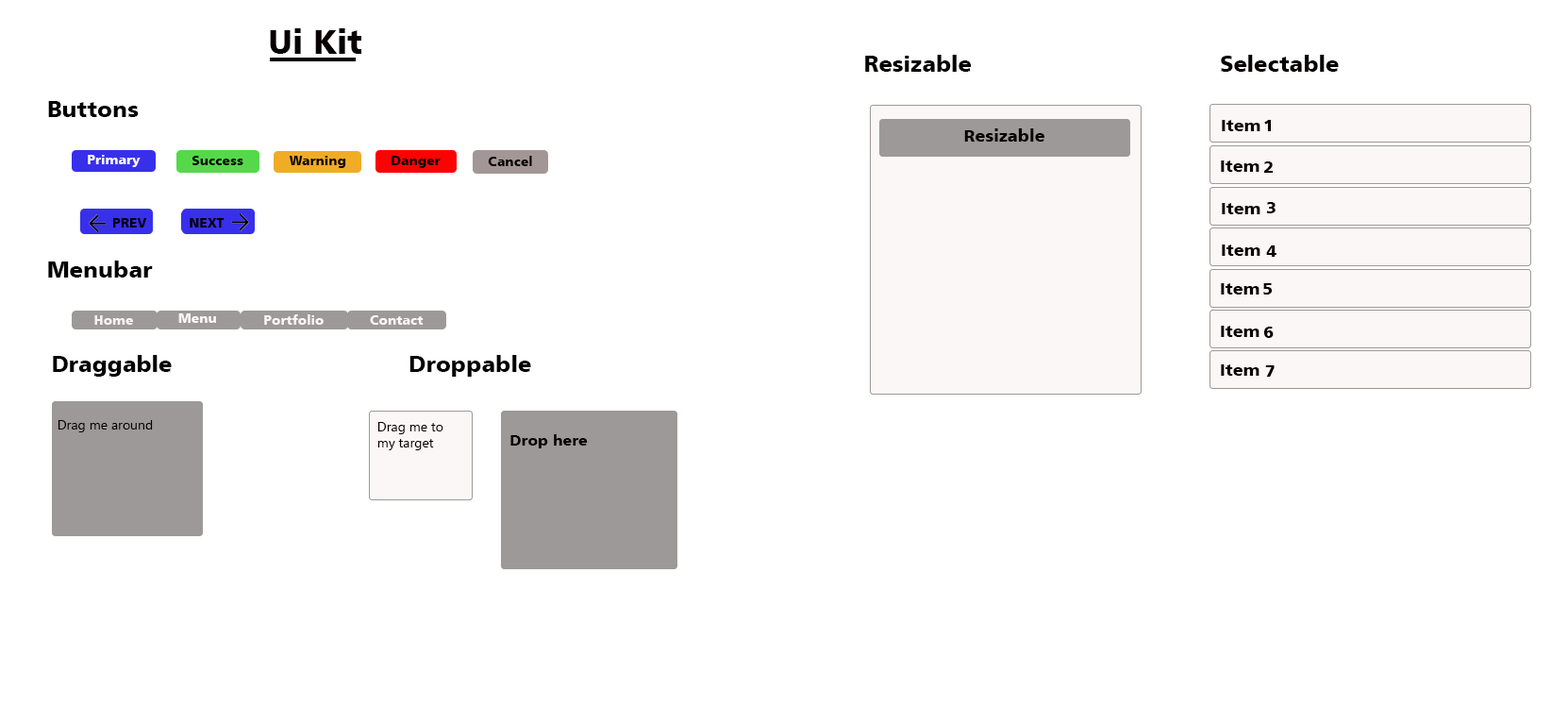
<style>
.page{position:relative;width:1568px;height:725px;background:#ffffff}
.page>*{position:absolute;margin:0}
.t1{font:34px "Humanist777BT-BlackB";color:#070000}
.t2{font:22.6px "Humanist777BT-BlackB";color:#070000}
.t3{font:22.6px "Humanist777BT-BlackB";color:#040000}
.t4{font:17px "Humanist777BT-BlackB";color:#070000}
.t5{font:13.2px "Humanist777BT-BlackB";color:#faf8f8}
.t6{font:13.2px "Humanist777BT-BlackB";color:#040000}
.t7{font:13.2px "Humanist777BT-BlackB";color:#070000}
.t8{font:22.6px "Humanist777BT-BlackB";color:#000000}
.t9{font:13.2px "Humanist777BT-BlackB";color:#f8f2f2}
.t10{font:13.2px "Humanist777BT-BlackB";color:#fbf8f8}
.t11{font:13.2px "Humanist777BT-BlackB";color:#f9f6f6}
.t12{font:13.2px "Humanist777BT-BlackB";color:#fbf7f7}
.t13{font:22.6px "Humanist777BT-BlackB";color:#050000}
.t14{font:13.2px "MicrosoftTaiLe";color:#050000}
.t15{font:15.1px "Humanist777BT-BlackB";color:#050000}
</style>
<div class="page">
<p class="t1" style="left:270px;top:28px;width:92px;height:26px">Ui Kit</p>
<p class="t2" style="left:865px;top:55px;width:107px;height:17px">Resizable</p>
<p class="t2" style="left:1221px;top:55px;width:118px;height:17px">Selectable</p>
<p class="t3" style="left:48px;top:101px;width:91px;height:16px">Buttons</p>
<p class="t4" style="left:1222px;top:120px;width:38px;height:11px">Item</p>
<p class="t4" style="left:1264px;top:120px;width:7px;height:11px">1</p>
<p class="t4" style="left:964px;top:128px;width:80px;height:14px">Resizable</p>
<p class="t5" style="left:88px;top:155px;width:53px;height:12px">Primary</p>
<p class="t6" style="left:192px;top:156px;width:51px;height:9px">Success</p>
<p class="t6" style="left:289px;top:156px;width:57px;height:12px">Warning</p>
<p class="t6" style="left:392px;top:156px;width:49px;height:12px">Danger</p>
<p class="t6" style="left:488px;top:156px;width:44px;height:10px">Cancel</p>
<p class="t4" style="left:1221px;top:160px;width:38px;height:12px">Item</p>
<p class="t4" style="left:1264px;top:161px;width:9px;height:12px">2</p>
<p class="t4" style="left:1222px;top:203px;width:38px;height:11px">Item</p>
<p class="t4" style="left:1266px;top:202px;width:10px;height:11px">3</p>
<p class="t6" style="left:113px;top:218px;width:34px;height:9px">PREV</p>
<p class="t7" style="left:190px;top:218px;width:35px;height:9px">NEXT</p>
<p class="t4" style="left:1222px;top:244px;width:38px;height:12px">Item</p>
<p class="t4" style="left:1266px;top:245px;width:10px;height:12px">4</p>
<p class="t8" style="left:48px;top:260px;width:105px;height:17px">Menubar</p>
<p class="t4" style="left:1221px;top:283px;width:38px;height:11px">Item</p>
<p class="t4" style="left:1263px;top:283px;width:10px;height:11px">5</p>
<p class="t9" style="left:94px;top:315px;width:39px;height:10px">Home</p>
<p class="t10" style="left:178px;top:313px;width:38px;height:10px">Menu</p>
<p class="t11" style="left:264px;top:314px;width:60px;height:11px">Portfolio</p>
<p class="t12" style="left:370px;top:315px;width:54px;height:10px">Contact</p>
<p class="t4" style="left:1221px;top:325px;width:38px;height:12px">Item</p>
<p class="t4" style="left:1263px;top:326px;width:11px;height:12px">6</p>
<p class="t13" style="left:53px;top:355px;width:119px;height:21px">Draggable</p>
<p class="t13" style="left:409px;top:355px;width:122px;height:21px">Droppable</p>
<p class="t4" style="left:1221px;top:364px;width:38px;height:11px">Item</p>
<p class="t4" style="left:1265px;top:365px;width:10px;height:11px">7</p>
<p class="t14" style="left:58px;top:420px;width:95px;height:12px">Drag me around</p>
<p class="t14" style="left:377px;top:422px;width:66px;height:28px">Drag me to my target</p>
<p class="t15" style="left:510px;top:434px;width:78px;height:14px">Drop here</p>
</div>
